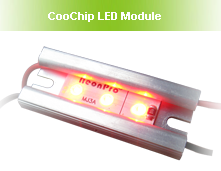
<style>
.page{position:relative;width:221px;height:171px;background:#ffffff}
.page>*{position:absolute;margin:0}
.t1{font:11px "Arial-BoldMT";color:#ffffff}
</style>
<div class="page">
<p class="t1" style="left:48px;top:12px;width:113px;height:10px">CooChip LED Module</p>
</div>
